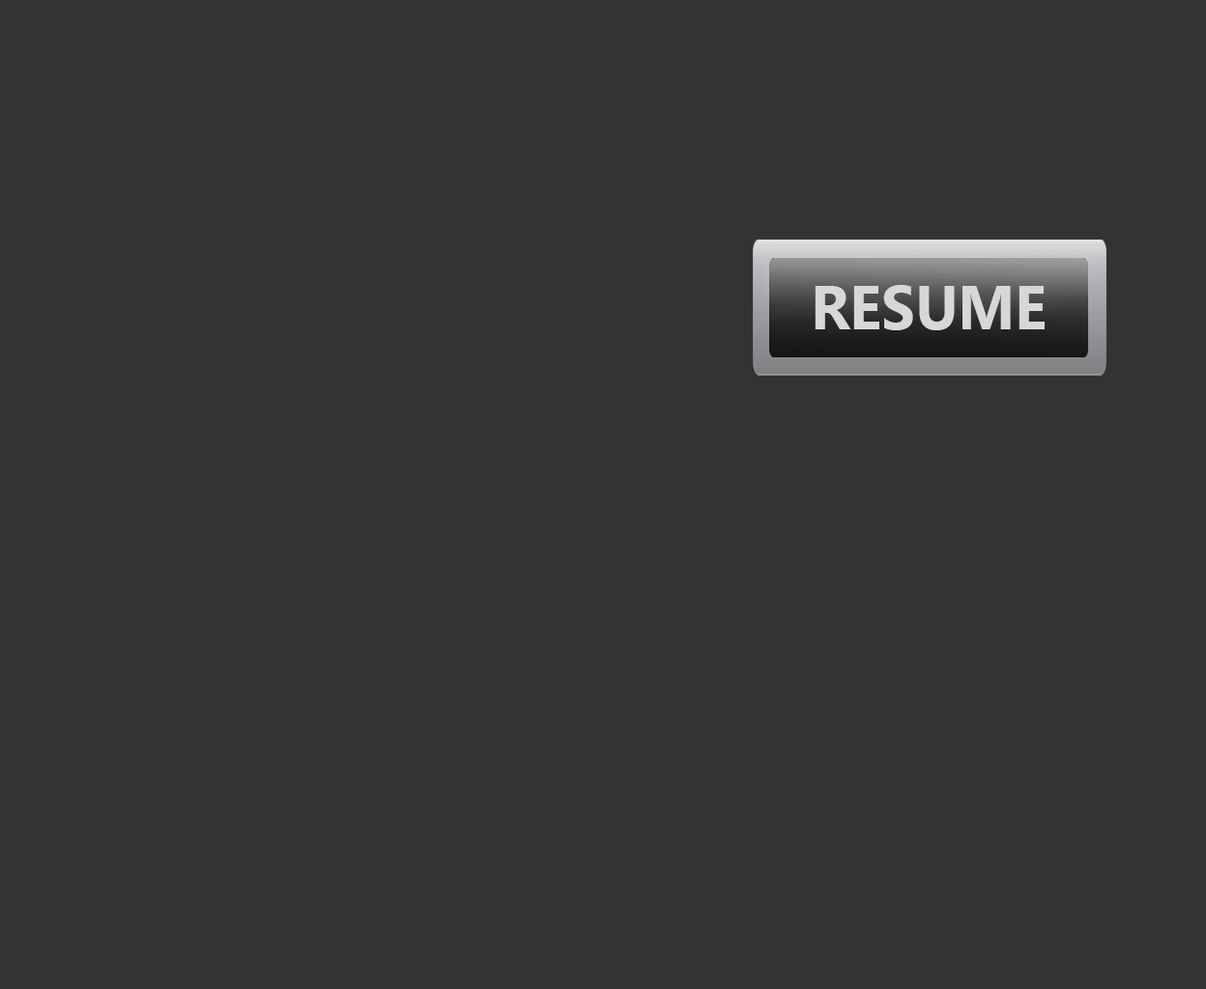
<style>
.page{position:relative;width:1206px;height:989px;background:#333333}
.page>*{position:absolute;margin:0}
.t1{font:61.5px "MicrosoftTaiLe-Bold";color:#d7d7d7;scale:0.97 1}
</style>
<div class="page">
<p class="t1" style="left:814px;top:285px;width:230px;height:45px">RESUME</p>
</div>
